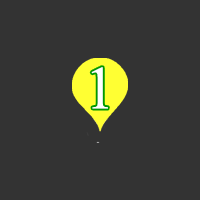
<style>
.page{position:relative;width:200px;height:200px;background:#333333}
.page>*{position:absolute;margin:0}
.t1{font:60.6px "TimesNewRomanPSMT";color:#ffffff}
</style>
<div class="page">
<p class="t1" style="left:91px;top:67px;width:17px;height:42px">1</p>
</div>
